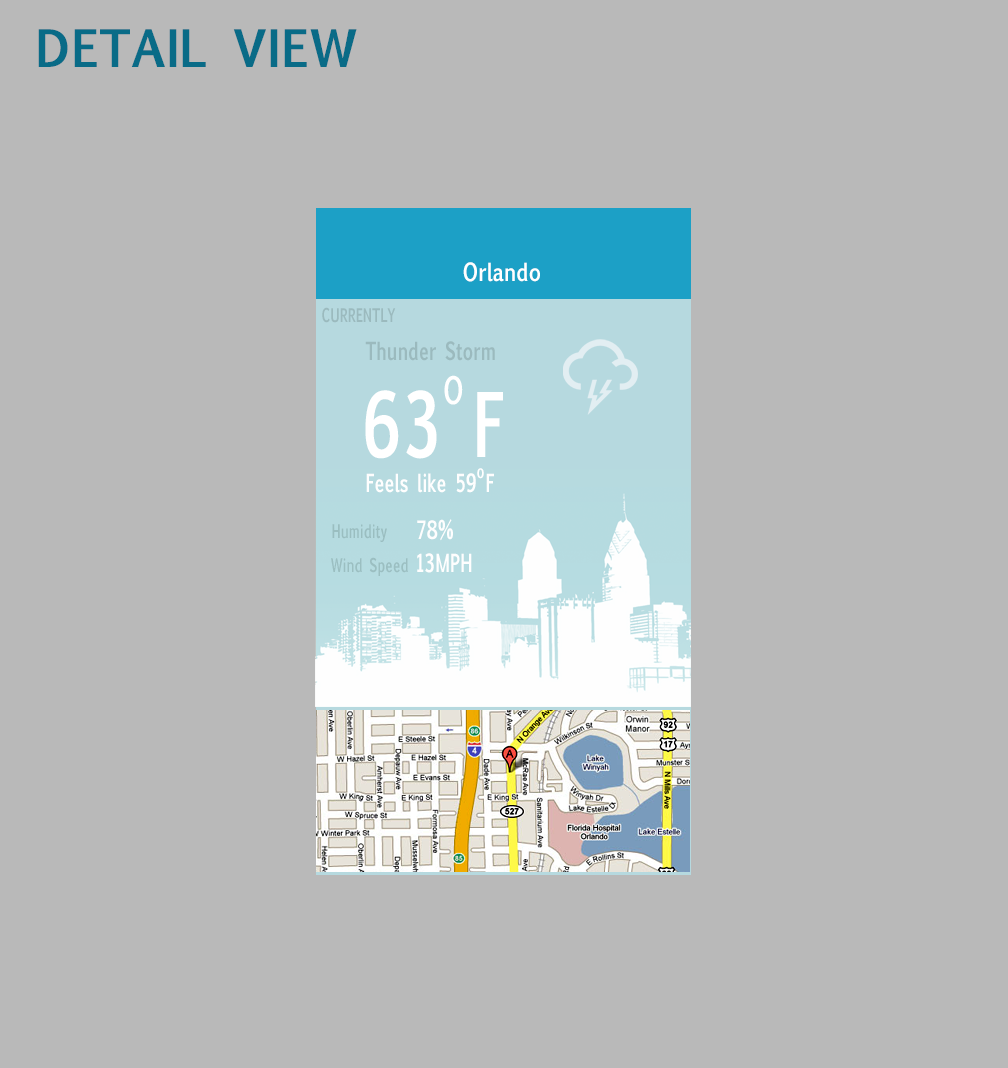
<style>
.page{position:relative;width:1008px;height:1068px;background:#b9b9b9}
.page>*{position:absolute;margin:0}
.t1{font:49.3px "EuphemiaUCAS-Bold";color:#096b87}
.t2{font:24px "EuphemiaUCAS-Bold";color:#ffffff;scale:0.8 1}
.t3{font:18px "EuphemiaUCAS-Bold";color:#9bbabe;scale:0.7 1}
.t4{font:24px "EuphemiaUCAS-Bold";color:#9bbabe;scale:0.7 1}
.t5{font:36px "EuphemiaUCAS-Bold";color:#ffffff;scale:0.7 1}
.t6{font:85px "EuphemiaUCAS-Bold";color:#ffffff;scale:0.7 1}
.t7{font:24px "EuphemiaUCAS-Bold";color:#fefefe;scale:0.7 1}
.t8{font:18px "EuphemiaUCAS-Bold";color:#ffffff;scale:0.7 1}
</style>
<div class="page">
<p class="t1" style="left:38px;top:29px;width:319px;height:38px">DETAIL VIEW</p>
<p class="t2" style="left:463px;top:262px;width:77px;height:20px">Orlando</p>
<p class="t3" style="left:322px;top:307px;width:74px;height:16px">CURRENTLY</p>
<p class="t4" style="left:365px;top:341px;width:130px;height:20px">Thunder Storm</p>
<p class="t5" style="left:444px;top:375px;width:19px;height:30px">O</p>
<p class="t6" style="left:365px;top:390px;width:138px;height:69px">63 F</p>
<p class="t7" style="left:366px;top:473px;width:128px;height:20px">Feels like 59 F</p>
<p class="t8" style="left:477px;top:468px;width:7px;height:11px">o</p>
<p class="t7" style="left:417px;top:519px;width:36px;height:22px">78%</p>
<p class="t3" style="left:332px;top:524px;width:55px;height:18px">Humidity</p>
<p class="t3" style="left:331px;top:557px;width:77px;height:19px">Wind Speed</p>
<p class="t7" style="left:417px;top:553px;width:55px;height:20px">13MPH</p>
</div>
